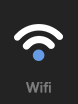
<style>
.page{position:relative;width:78px;height:104px;background:#232323}
.page>*{position:absolute;margin:0}
.t1{font:14px "SegoeUI";color:#7c7c7c;font-weight:bold}
</style>
<div class="page">
<p class="t1" style="left:26px;top:82px;width:25px;height:11px">Wifi</p>
</div>
